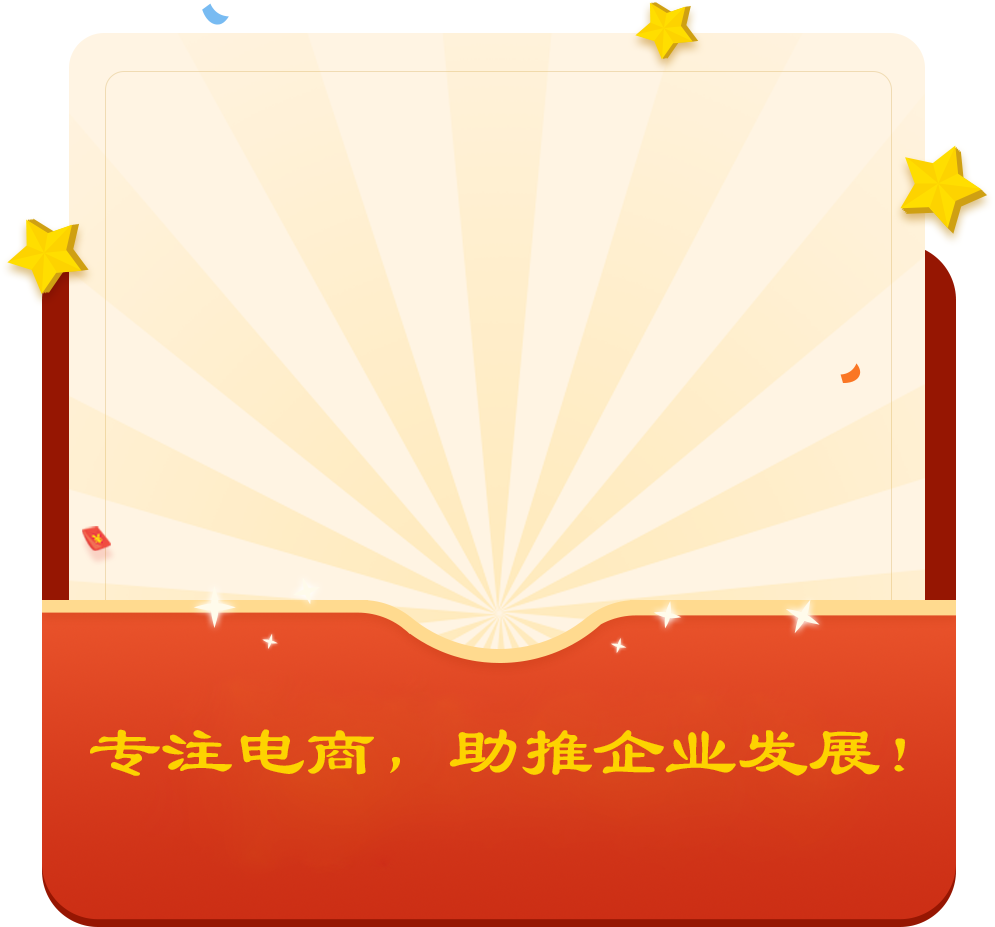
<style>
.page{position:relative;width:995px;height:927px;background:#fff4e3}
.page>*{position:absolute;margin:0}
.t1{font:72px "STBaoliSC-Regular";color:#fdd300;text-transform:uppercase}
</style>
<div class="page">
<p class="t1" style="left:90px;top:729px;width:815px;height:47px">专注电商，助推企业发展！</p>
</div>
